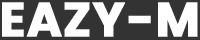
<style>
.page{position:relative;width:200px;height:40px;background:#333333}
.page>*{position:absolute;margin:0}
.t1{font:48px "Poppins-Bold";color:#ffffff;font-weight:bold}
</style>
<div class="page">
<p class="t1" style="left:2px;top:2px;width:196px;height:35px">EAZY-M</p>
</div>
